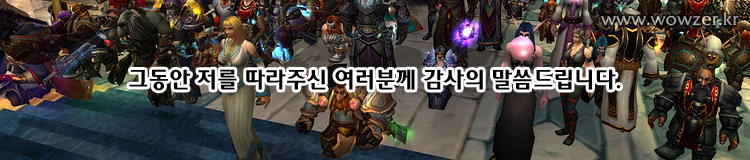
<style>
.page{position:relative;width:750px;height:160px}
.page>*{position:absolute;margin:0}
.t1{font:18px "-2002";color:#a8a7a2}
.t2{font:24px "YDI2002";color:#010000}
</style>
<div class="page">
<p class="t1" style="left:600px;top:12px;width:139px;height:14px">www.wowzer.kr</p>
<p class="t2" style="left:129px;top:69px;width:492px;height:22px">그동안 저를 따라주신 여러분께 감사의 말씀드립니다.</p>
</div>
